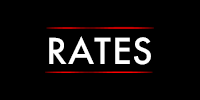
<style>
.page{position:relative;width:200px;height:100px;background:#000000}
.page>*{position:absolute;margin:0}
.t1{font:34.8px "Futura-Medium";letter-spacing:0.025em;color:#ffffff}
</style>
<div class="page">
<p class="t1" style="left:49px;top:36px;width:102px;height:29px">RATES</p>
</div>
